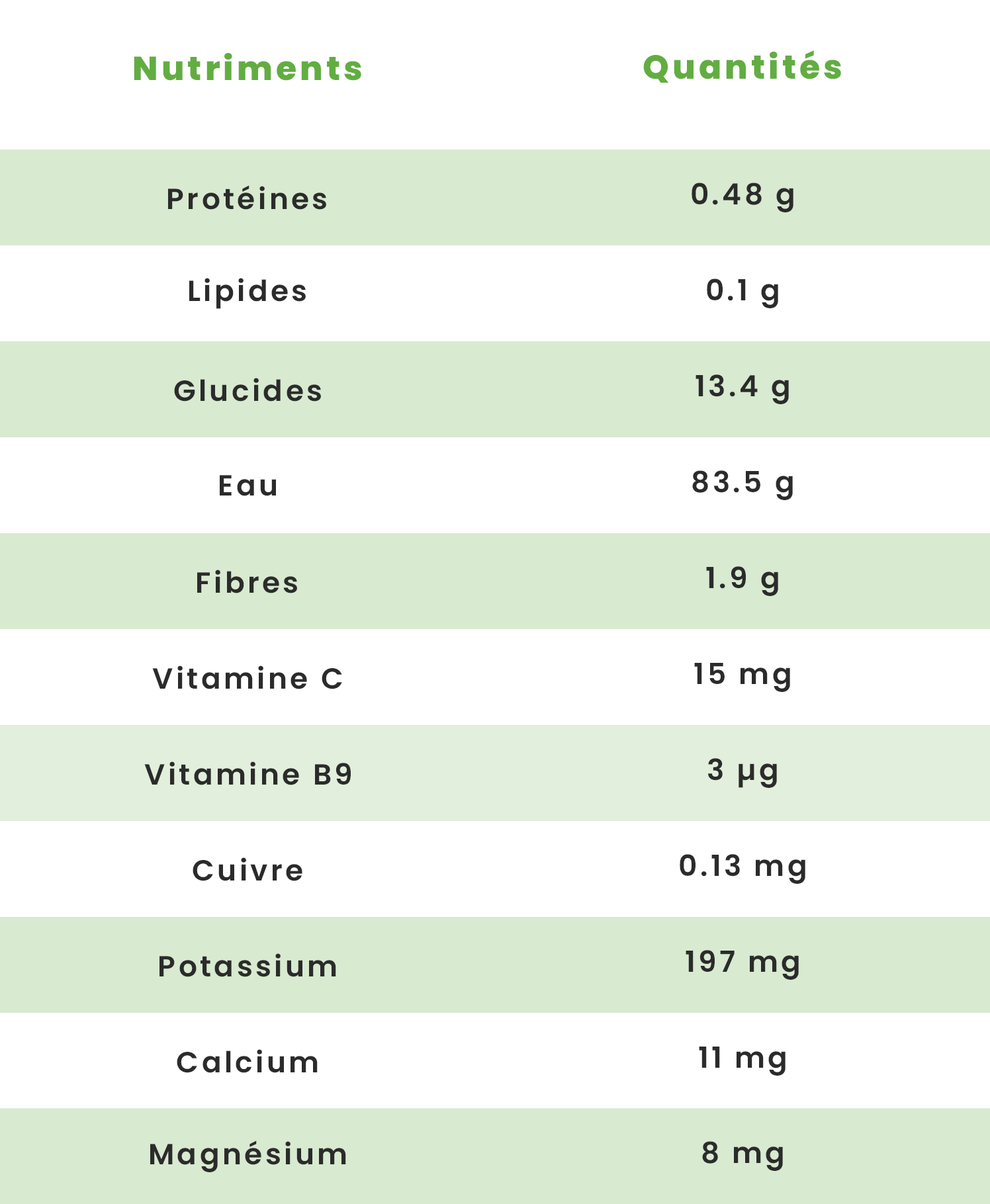
<style>
.page{position:relative;width:990px;height:1204px;background:#ffffff}
.page>*{position:absolute;margin:0}
.t1{font:33.3px "Poppins-ExtraBold";letter-spacing:0.1em;color:#62ad42}
.t2{font:29.1px "Poppins-SemiBold";letter-spacing:0.1em;color:#2b2b2b}
</style>
<div class="page">
<p class="t1" style="left:134px;top:53px;width:227px;height:28px">Nutriments</p>
<p class="t1" style="left:643px;top:50px;width:198px;height:33px">Quantités</p>
<p class="t2" style="left:168px;top:185px;width:158px;height:25px">Protéines</p>
<p class="t2" style="left:692px;top:183px;width:101px;height:29px">0.48 g</p>
<p class="t2" style="left:189px;top:278px;width:117px;height:31px">Lipides</p>
<p class="t2" style="left:707px;top:279px;width:71px;height:29px">0.1 g</p>
<p class="t2" style="left:174px;top:378px;width:147px;height:24px">Glucides</p>
<p class="t2" style="left:696px;top:375px;width:93px;height:29px">13.4 g</p>
<p class="t2" style="left:692px;top:471px;width:101px;height:29px">83.5 g</p>
<p class="t2" style="left:220px;top:475px;width:56px;height:21px">Eau</p>
<p class="t2" style="left:197px;top:570px;width:100px;height:24px">Fibres</p>
<p class="t2" style="left:706px;top:566px;width:72px;height:30px">1.9 g</p>
<p class="t2" style="left:152px;top:666px;width:190px;height:24px">Vitamine C</p>
<p class="t2" style="left:694px;top:663px;width:96px;height:29px">15 mg</p>
<p class="t2" style="left:144px;top:762px;width:207px;height:24px">Vitamine B9</p>
<p class="t2" style="left:708px;top:758px;width:69px;height:30px">3 µg</p>
<p class="t2" style="left:193px;top:858px;width:109px;height:23px">Cuivre</p>
<p class="t2" style="left:680px;top:854px;width:125px;height:30px">0.13 mg</p>
<p class="t2" style="left:159px;top:954px;width:177px;height:23px">Potassium</p>
<p class="t2" style="left:686px;top:950px;width:113px;height:30px">197 mg</p>
<p class="t2" style="left:177px;top:1050px;width:141px;height:23px">Calcium</p>
<p class="t2" style="left:699px;top:1047px;width:87px;height:29px">11 mg</p>
<p class="t2" style="left:150px;top:1141px;width:196px;height:32px">Magnésium</p>
<p class="t2" style="left:702px;top:1142px;width:81px;height:29px">8 mg</p>
</div>
